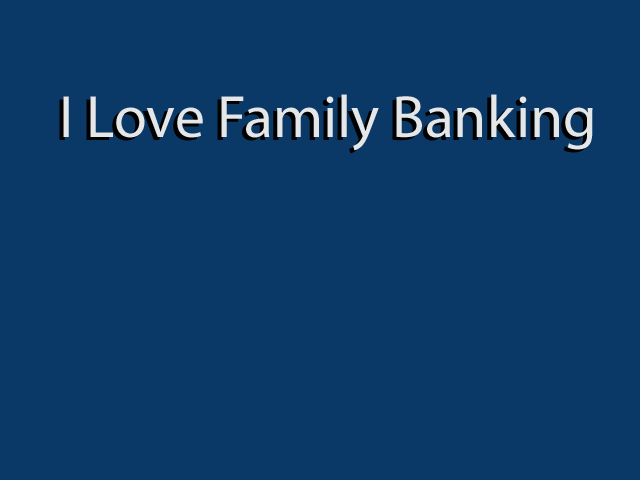
<style>
.page{position:relative;width:640px;height:480px;background:#0b3967}
.page>*{position:absolute;margin:0}
.t1{font:60px "MyriadPro-Regular";color:#e4e6e8}
</style>
<div class="page">
<p class="t1" style="left:63px;top:94px;width:530px;height:57px">I Love Family Banking</p>
</div>
